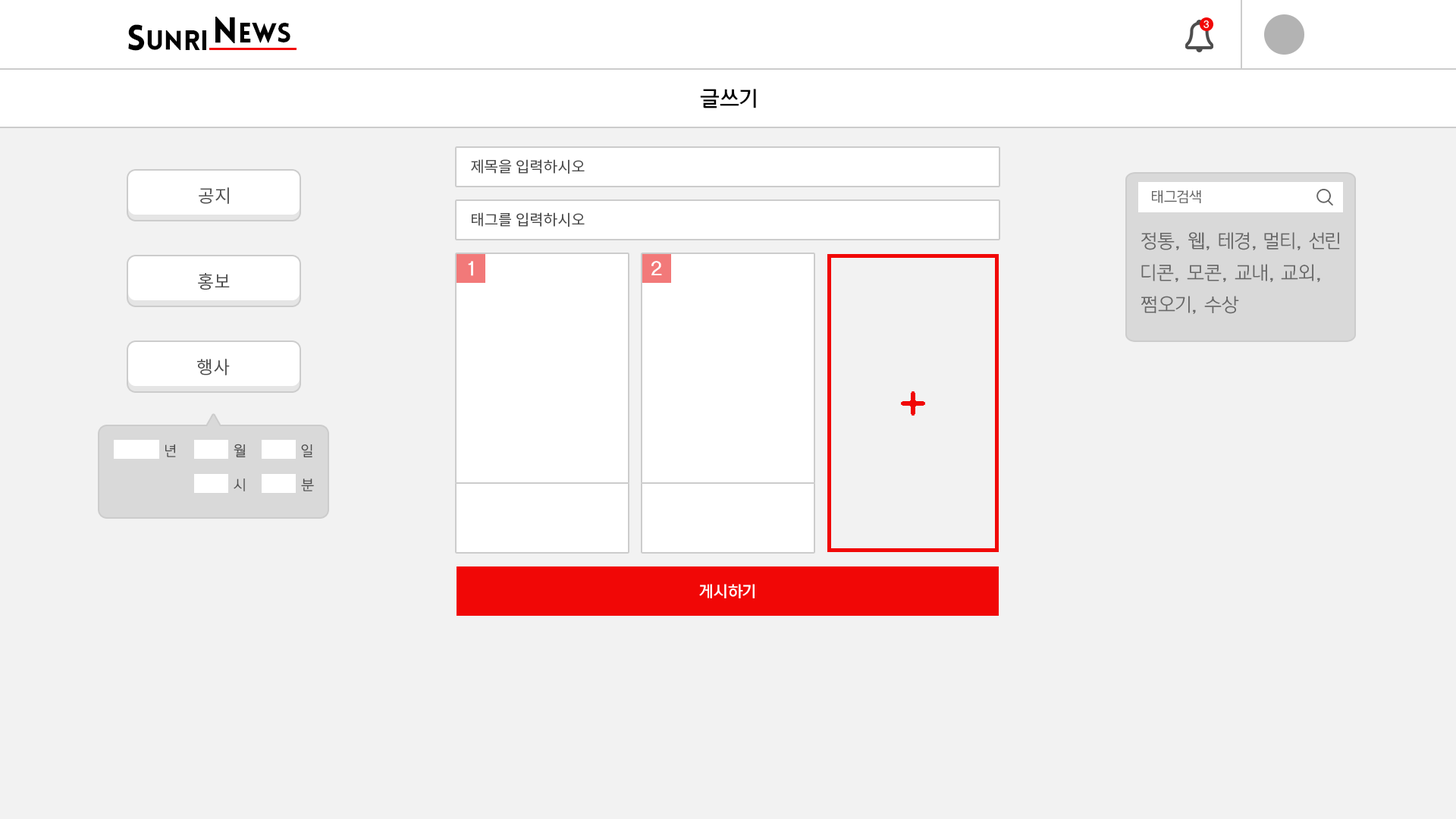
<style>
.page{position:relative;width:1456px;height:819px;background:#f2f2f2}
.page>*{position:absolute;margin:0}
.t1{font:27px "LoveloBlack";color:#000000}
.t2{font:35.4px "LoveloBlack";color:#000000}
.t3{font:9.1px "KoreanDREAM2-R";color:#ffffff}
.t4{font:20.5px "KoreanDREAM4-R";color:#000000}
.t5{font:15.2px "NotoSansCJKkr-Regular";color:#4d4d4d}
.t6{font:18.2px "NotoSansCJKkr-Regular";color:#4d4d4d}
.t7{font:13.6px "KoreanDREAM2-R";color:#666666}
.t8{font:18.2px "KoreanDREAM2-R";color:#666666}
.t9{font:18.2px "KoreanDREAM2-R";color:#ffffff;font-weight:bold}
.t10{font:13.6px "KoreanDREAM2-R";color:#4d4d4d}
.t11{font:15.2px "KoreanDREAM4-R";color:#ffffff}
</style>
<div class="page">
<p class="t1" style="left:215px;top:17px;width:75px;height:26px"><span class="t2">N</span>ews</p>
<p class="t1" style="left:128px;top:24px;width:78px;height:27px"><span class="t2">S</span>unri</p>
<p class="t3" style="left:1203px;top:20px;width:6px;height:8px">3</p>
<p class="t4" style="left:700px;top:89px;width:56px;height:19px">글쓰기</p>
<p class="t5" style="left:471px;top:159px;width:114px;height:15px">제목을 입력하시오</p>
<p class="t6" style="left:199px;top:187px;width:30px;height:17px">공지</p>
<p class="t7" style="left:1152px;top:190px;width:49px;height:13px">태그검색</p>
<p class="t5" style="left:472px;top:212px;width:113px;height:15px">태그를 입력하시오</p>
<p class="t8" style="left:1141px;top:232px;width:199px;height:82px">정통, 웹, 테경, 멀티, 선린<br>디콘, 모콘, 교내, 교외,<br>쩜오기, 수상</p>
<p class="t9" style="left:468px;top:261px;width:5px;height:15px">1</p>
<p class="t9" style="left:651px;top:261px;width:11px;height:14px">2</p>
<p class="t6" style="left:198px;top:273px;width:32px;height:17px">홍보</p>
<p class="t6" style="left:197px;top:359px;width:33px;height:16px">행사</p>
<p class="t10" style="left:165px;top:444px;width:11px;height:13px">년</p>
<p class="t10" style="left:234px;top:444px;width:12px;height:13px">월</p>
<p class="t10" style="left:301px;top:444px;width:11px;height:13px">일</p>
<p class="t10" style="left:234px;top:479px;width:11px;height:12px">시</p>
<p class="t10" style="left:301px;top:479px;width:13px;height:12px">분</p>
<p class="t11" style="left:699px;top:584px;width:56px;height:14px">게시하기</p>
</div>
